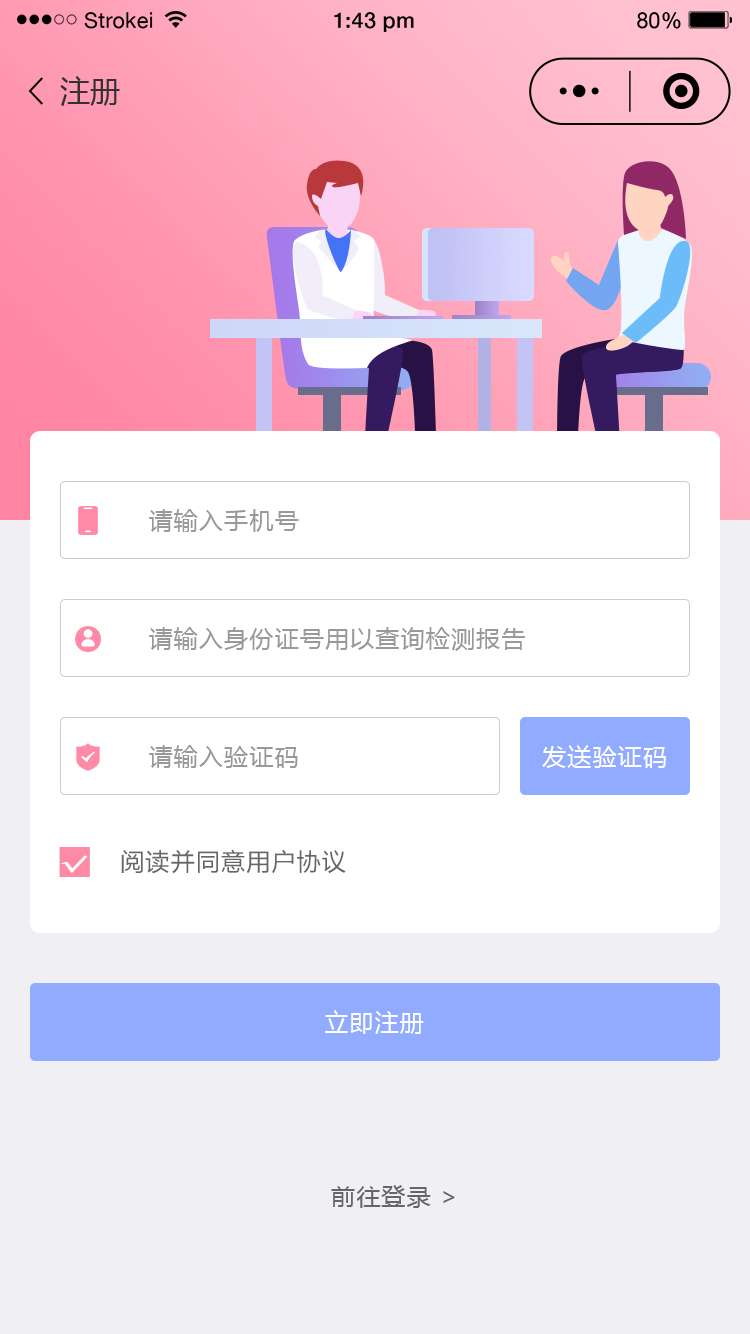
<style>
.page{position:relative;width:750px;height:1334px;background:#ffffff}
.page>*{position:absolute;margin:0}
.t1{font:30px "MicrosoftYaHei";color:#333333}
.t2{font:24px "MicrosoftYaHei";letter-spacing:0.05em;color:#999999}
.t3{font:24px "MicrosoftYaHei";letter-spacing:0.05em;color:#ffffff}
.t4{font:27px "FangSong";color:#ffffff;font-weight:bold;scale:1.67 1}
.t5{font:24px "MicrosoftYaHei";letter-spacing:0.05em;color:#666666}
</style>
<div class="page">
<p class="t1" style="left:60px;top:76px;width:60px;height:30px">注册</p>
<p class="t2" style="left:149px;top:509px;width:150px;height:23px">请输入手机号</p>
<p class="t2" style="left:149px;top:627px;width:376px;height:24px">请输入身份证号用以查询检测报告</p>
<p class="t2" style="left:149px;top:745px;width:149px;height:23px">请输入验证码</p>
<p class="t3" style="left:542px;top:745px;width:124px;height:23px">发送验证码</p>
<p class="t4" style="left:61px;top:855px;width:27px;height:18px;rotate:15deg">√</p>
<p class="t5" style="left:121px;top:849px;width:225px;height:25px">阅读并同意用户协议</p>
<p class="t3" style="left:325px;top:1010px;width:99px;height:24px">立即注册</p>
<p class="t5" style="left:331px;top:1185px;width:124px;height:23px">前往登录 &gt;</p>
</div>
